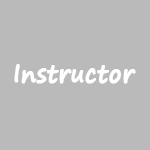
<style>
.page{position:relative;width:150px;height:150px;background:#bababa}
.page>*{position:absolute;margin:0}
.t1{font:25px "SegoePrint-Bold";color:#ffffff;font-weight:bold;scale:0.92 1}
</style>
<div class="page">
<p class="t1" style="left:14px;top:64px;width:122px;height:20px">Instructor</p>
</div>
